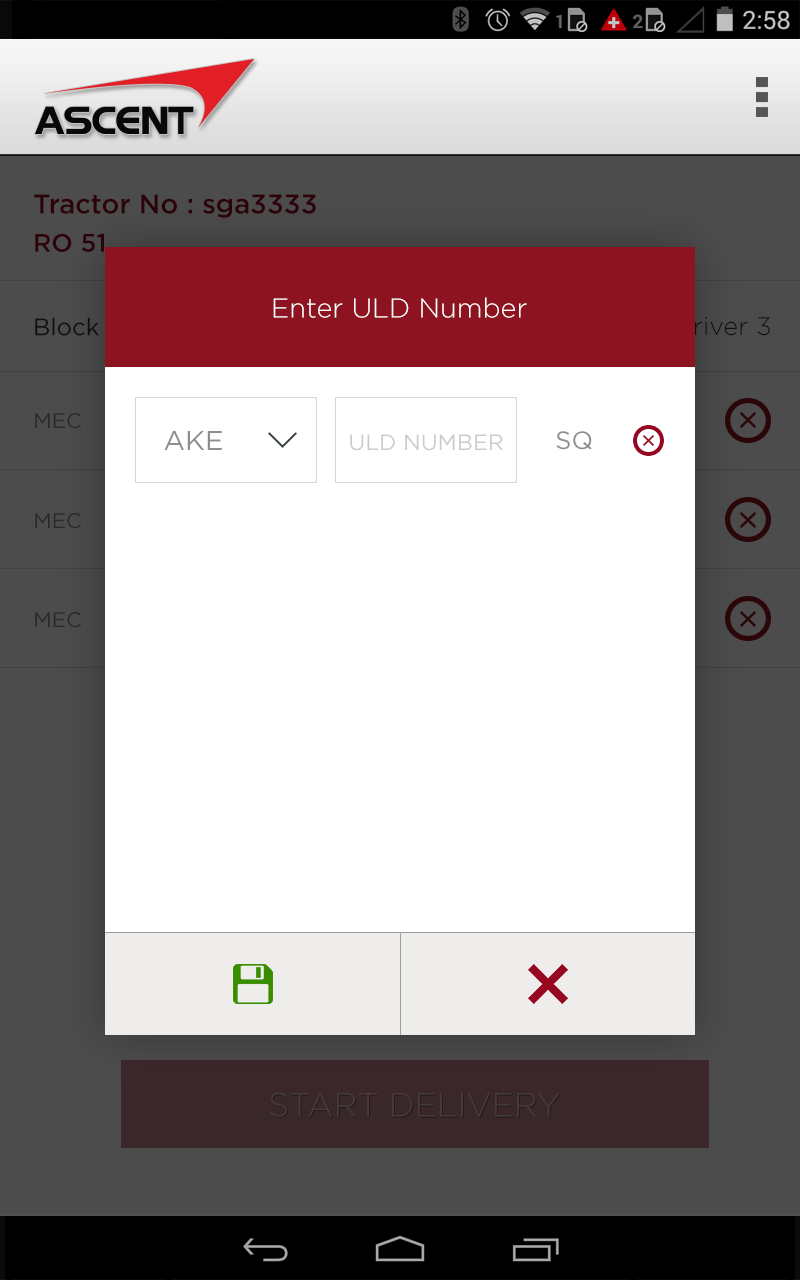
<style>
.page{position:relative;width:800px;height:1280px;background:#ffffff}
.page>*{position:absolute;margin:0}
.t1{font:27.2px "Gotham-Medium";color:#2d020a}
.t2{font:25.4px "Gotham-Medium";color:#2d020a}
.t3{font:27.2px "Gotham-Light";color:#ffffff}
.t4{font:25.4px "Gotham-Light"}
.t5{font:21.1px "Gotham-Book";color:#2a2a2a}
.t6{font:27.3px "Gotham-Book";color:#8e8e8e}
.t7{font:22px "Gotham-Book";color:#cbcbcb}
.t8{font:25px "Gotham-Book";color:#8e8e8e}
.t9{font:33.5px "Gotham-Light";color:#443b3d}
</style>
<div class="page">
<p class="t1" style="left:34px;top:194px;width:282px;height:24px">Tractor No : sga3333</p>
<p class="t2" style="left:35px;top:233px;width:69px;height:19px">RO 51</p>
<p class="t3" style="left:273px;top:297px;width:254px;height:21px">Enter ULD Number</p>
<p class="t4" style="left:675px;top:317px;width:95px;height:19px">Driver 3</p>
<p class="t5" style="left:35px;top:413px;width:46px;height:16px">MEC</p>
<p class="t6" style="left:164px;top:430px;width:58px;height:20px">AKE</p>
<p class="t7" style="left:350px;top:434px;width:153px;height:17px">ULD NUMBER</p>
<p class="t8" style="left:556px;top:431px;width:36px;height:19px">SQ</p>
<p class="t5" style="left:35px;top:513px;width:46px;height:16px">MEC</p>
<p class="t5" style="left:35px;top:612px;width:46px;height:16px">MEC</p>
<p class="t9" style="left:270px;top:1092px;width:290px;height:25px">START DELIVERY</p>
</div>
